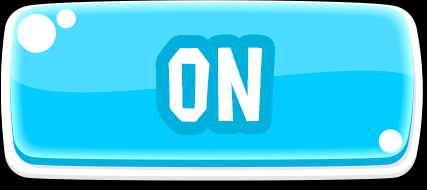
<style>
.page{position:relative;width:427px;height:190px;background:#00ccff}
.page>*{position:absolute;margin:0}
.t1{font:100px "Splat2K";letter-spacing:0.01em;color:#ffffff}
</style>
<div class="page">
<p class="t1" style="left:168px;top:47px;width:94px;height:75px">ON</p>
<p class="t1" style="left:168px;top:47px;width:94px;height:75px">ON</p>
</div>
